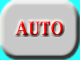
<style>
.page{position:relative;width:80px;height:60px;background:#c8c8c8}
.page>*{position:absolute;margin:0}
.t1{font:18px "MyungjoXB-HM"}
</style>
<div class="page">
<p class="t1" style="left:15px;top:21px;width:48px;height:14px">AUTO</p>
</div>
